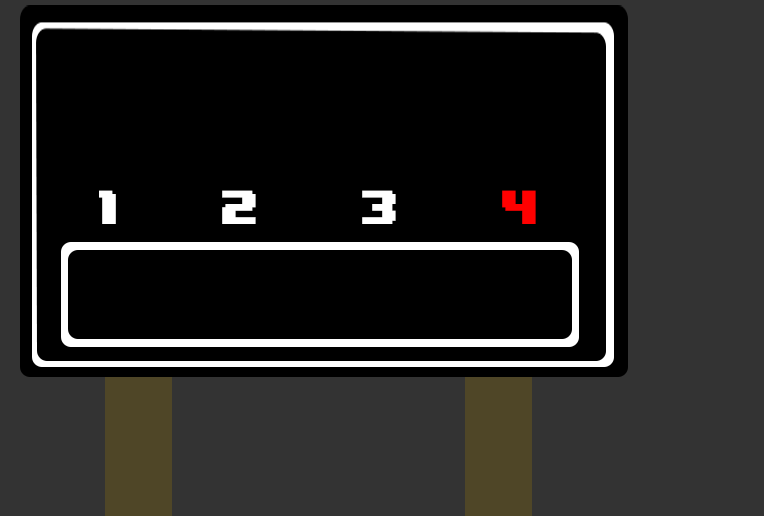
<style>
.page{position:relative;width:764px;height:516px;background:#000000}
.page>*{position:absolute;margin:0}
.t1{font:40px "8BITWONDERNominal";color:#ffffff}
.t2{font:40px "8BITWONDERNominal";color:#ff0000}
</style>
<div class="page">
<p class="t1" style="left:99px;top:190px;width:437px;height:34px">1     2     3     <span class="t2">4</span></p>
</div>
